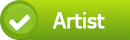
<style>
.page{position:relative;width:130px;height:40px}
.page>*{position:absolute;margin:0}
.t1{font:20.8px "Tahoma";color:#ffffff;font-weight:bold}
</style>
<div class="page">
<p class="t1" style="left:53px;top:12px;width:52px;height:17px">Artist</p>
</div>
